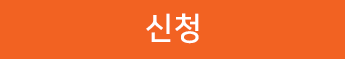
<style>
.page{position:relative;width:345px;height:59px;background:#f26222}
.page>*{position:absolute;margin:0}
.t1{font:31px "NanumSquareB";color:#ffffff}
</style>
<div class="page">
<p class="t1" style="left:146px;top:13px;width:53px;height:31px">신청</p>
</div>
